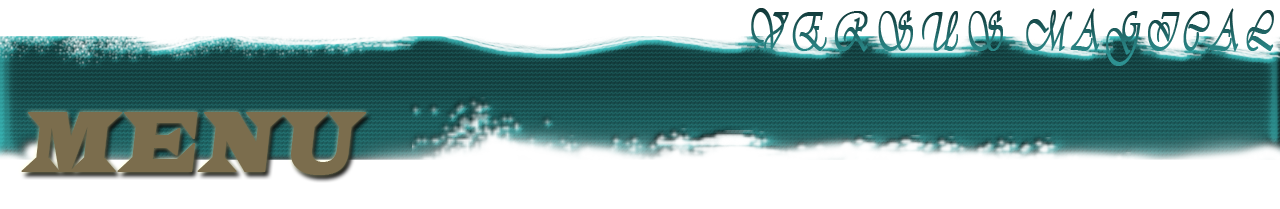
<style>
.page{position:relative;width:1280px;height:209px;background:#ffffff}
.page>*{position:absolute;margin:0}
.t1{font:56.9px "Vivaldii";letter-spacing:0.2em;font-weight:bold;scale:0.55 1}
.t2{font:88.2px "LatinWide";color:#7b6d4d;font-weight:bold;font-style:italic;scale:0.63 1}
</style>
<div class="page">
<p class="t1" style="left:751px;top:8px;width:523px;height:58px">VERSUS MAGICAL</p>
<p class="t2" style="left:21px;top:112px;width:346px;height:63px">MENU</p>
</div>
